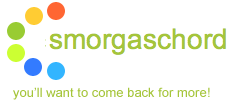
<style>
.page{position:relative;width:232px;height:110px;background:#ffffff}
.page>*{position:absolute;margin:0}
.t1{font:13px "ArialMT";color:#a5c53a}
</style>
<div class="page">
<p class="t1" style="left:13px;top:87px;width:197px;height:13px">you’ll want to come back for more!</p>
</div>
